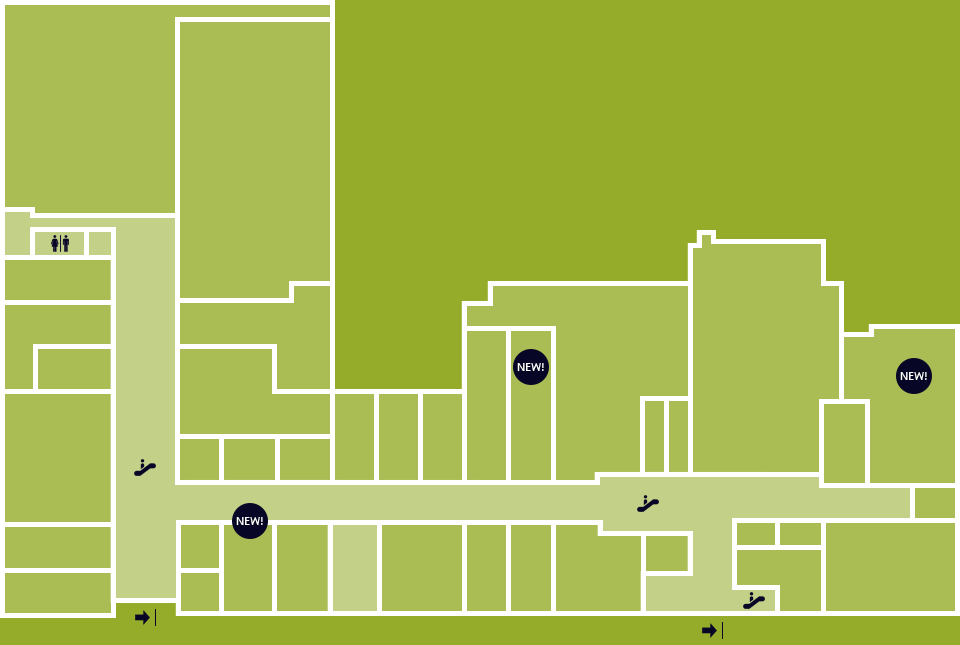
<style>
.page{position:relative;width:960px;height:645px;background:#a9bd54}
.page>*{position:absolute;margin:0}
.t1{font:11px "SegoeUI";color:#ffffff;text-transform:uppercase}
</style>
<div class="page">
<p class="t1" style="left:517px;top:363px;width:27px;height:8px">New!</p>
<p class="t1" style="left:900px;top:372px;width:27px;height:8px">New!</p>
<p class="t1" style="left:236px;top:517px;width:27px;height:8px">New!</p>
</div>
